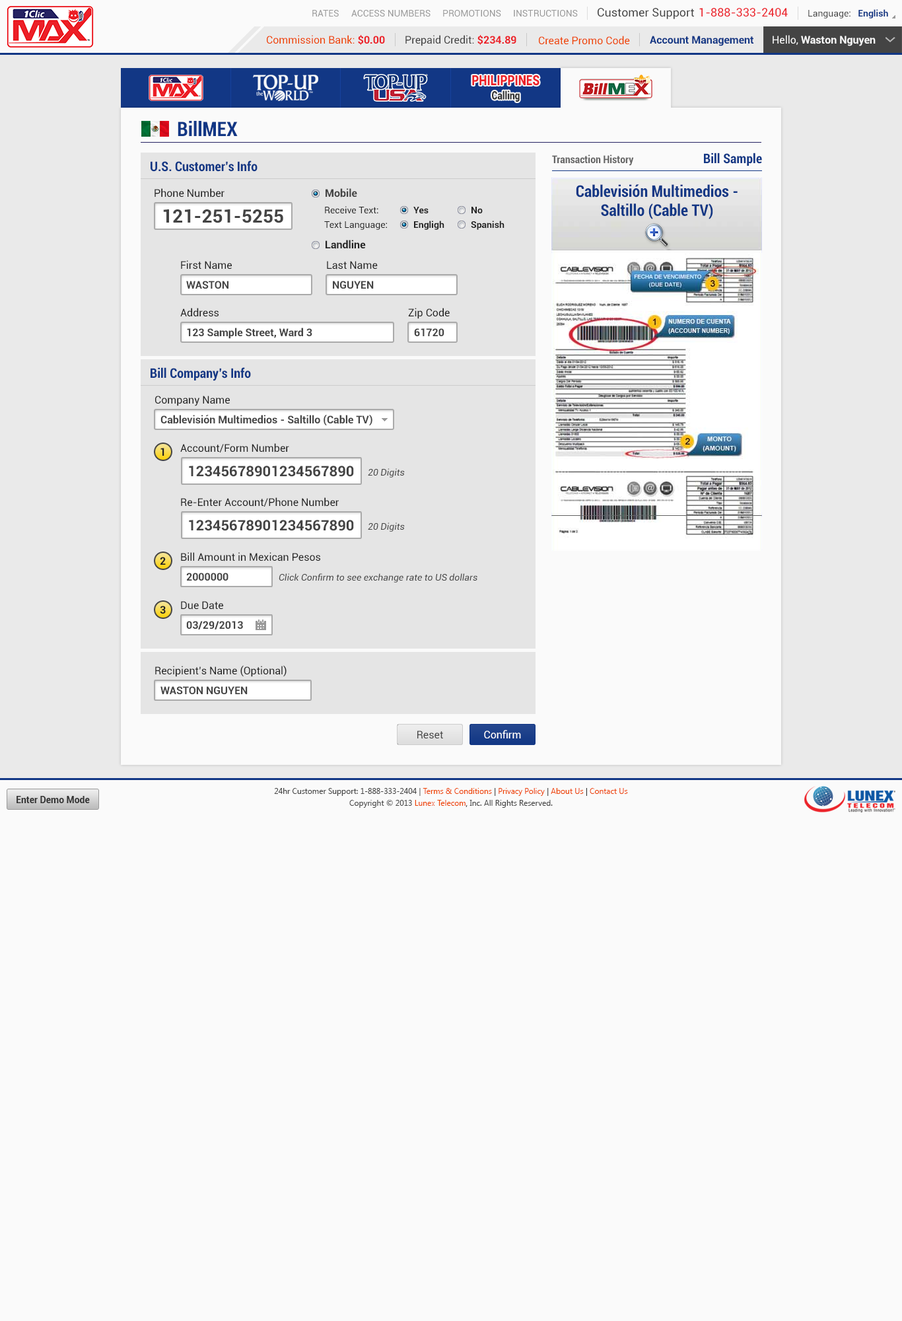
<style>
.page{position:relative;width:902px;height:1321px;background:#fafafa}
.page>*{position:absolute;margin:0}
.t1{font:9.2px "Roboto-Regular";color:#999999}
.t2{font:11.6px "Roboto-Regular";color:#444444}
.t3{font:11.6px "Roboto-Regular";color:#ec2029}
.t4{font:9.2px "Roboto-Regular";color:#444444}
.t5{font:9.2px "Roboto-Bold";color:#123785}
.t6{font:10.6px "Roboto-Regular";color:#ee4400}
.t7{font:10.6px "Roboto-Bold";color:#ec2028}
.t8{font:10.6px "Roboto-Regular";color:#444444}
.t9{font:10.6px "Roboto-Bold";color:#123785}
.t10{font:10.6px "Roboto-Bold";color:#fafafa}
.t11{font:10.6px "Roboto-Regular";color:#fafafa}
.t12{font:14.1px "Roboto-Black";color:#ec2028;scale:0.81 1}
.t13{font:11.3px "Roboto-Black";color:#333333;scale:0.81 1}
.t14{font:19.8px "Roboto-BoldCondensed";color:#123785}
.t15{font:13.2px "Roboto-BoldCondensed";color:#123785}
.t16{font:10.6px "Roboto-BoldCondensed";color:#666666}
.t17{font:15.9px "Roboto-BoldCondensed";color:#123785}
.t18{font:10.6px "Roboto-Regular";color:#222222}
.t19{font:10.6px "Roboto-Bold";color:#444444}
.t20{font:18.5px "Roboto-Bold";color:#444444}
.t21{font:9.2px "Roboto-Regular";color:#222222}
.t22{font:9.2px "Roboto-Bold";color:#222222}
.t23{font:10.6px "Roboto-Bold";color:#222222}
.t24{font:14.5px "Roboto-Bold";color:#444444}
.t25{font:9.2px "Roboto-Italic";color:#444444}
.t26{font:10.6px "Roboto-Regular";color:#ffffff}
.t27{font:9.2px "Roboto-Bold";color:#333333}
.t28{font:7.9px/11.9px "SegoeUI";color:#444444}
.t29{font:7.9px/11.9px "SegoeUI";color:#ee4400}
.t30{font:7.9px/11.9px "SegoeUI";color:#333333}
</style>
<div class="page">
<p class="t1" style="left:312px;top:10px;width:27px;height:7px">RATES</p>
<p class="t1" style="left:351px;top:10px;width:80px;height:7px">ACCESS NUMBERS</p>
<p class="t1" style="left:443px;top:10px;width:58px;height:7px">PROMOTIONS</p>
<p class="t1" style="left:514px;top:10px;width:64px;height:7px">INSTRUCTIONS</p>
<p class="t2" style="left:598px;top:8px;width:96px;height:11px">Customer Support</p>
<p class="t3" style="left:700px;top:8px;width:88px;height:9px">1-888-333-2404</p>
<p class="t4" style="left:809px;top:9px;width:80px;height:9px">Language:   <span class="t5">English</span></p>
<p class="t6" style="left:267px;top:35px;width:118px;height:10px">Commission Bank: <span class="t7">$0.00</span></p>
<p class="t8" style="left:406px;top:35px;width:111px;height:11px">Prepaid Credit: <span class="t7">$234.89</span></p>
<p class="t6" style="left:539px;top:36px;width:91px;height:9px">Create Promo Code</p>
<p class="t9" style="left:650px;top:36px;width:104px;height:10px">Account Management</p>
<p class="t10" style="left:773px;top:35px;width:103px;height:11px"><span class="t11">Hello, </span>Waston Nguyen</p>
<p class="t12" style="left:472px;top:75px;width:68px;height:11px">PHILIPPINES</p>
<p class="t13" style="left:492px;top:91px;width:28px;height:11px">Calling</p>
<p class="t14" style="left:178px;top:121px;width:60px;height:15px">BillMEX</p>
<p class="t15" style="left:151px;top:161px;width:107px;height:11px">U.S. Customer’s Info</p>
<p class="t16" style="left:552px;top:155px;width:82px;height:11px">Transaction History</p>
<p class="t15" style="left:704px;top:153px;width:58px;height:13px">Bill Sample</p>
<p class="t17" style="left:576px;top:184px;width:162px;height:35px;text-align:center">Cablevisión Multimedios -<br>Saltillo (Cable TV)</p>
<p class="t18" style="left:155px;top:188px;width:70px;height:10px">Phone Number</p>
<p class="t19" style="left:326px;top:188px;width:31px;height:10px">Mobile</p>
<p class="t20" style="left:163px;top:209px;width:120px;height:14px">121-251-5255</p>
<p class="t21" style="left:325px;top:206px;width:54px;height:7px">Receive Text:</p>
<p class="t22" style="left:414px;top:207px;width:15px;height:6px">Yes</p>
<p class="t22" style="left:472px;top:207px;width:11px;height:6px">No</p>
<p class="t21" style="left:324px;top:221px;width:63px;height:9px">Text Language:</p>
<p class="t22" style="left:414px;top:221px;width:31px;height:9px">Engligh</p>
<p class="t22" style="left:471px;top:221px;width:34px;height:9px">Spanish</p>
<p class="t23" style="left:326px;top:240px;width:40px;height:9px">Landline</p>
<p class="t18" style="left:181px;top:260px;width:51px;height:10px">First Name</p>
<p class="t18" style="left:327px;top:261px;width:51px;height:9px">Last Name</p>
<p class="t19" style="left:186px;top:281px;width:43px;height:8px">WASTON</p>
<p class="t19" style="left:333px;top:281px;width:41px;height:8px">NGUYEN</p>
<p class="t18" style="left:180px;top:308px;width:39px;height:8px">Address</p>
<p class="t18" style="left:408px;top:308px;width:42px;height:11px">Zip Code</p>
<p class="t19" style="left:187px;top:328px;width:125px;height:11px">123 Sample Street, Ward 3</p>
<p class="t19" style="left:414px;top:328px;width:31px;height:8px">61720</p>
<p class="t15" style="left:151px;top:367px;width:100px;height:14px">Bill Company’s Info</p>
<p class="t18" style="left:155px;top:396px;width:75px;height:10px">Company Name</p>
<p class="t19" style="left:161px;top:414px;width:212px;height:12px">Cablevisión Multimedios - Saltillo (Cable TV)</p>
<p class="t23" style="left:161px;top:448px;width:4px;height:8px">1</p>
<p class="t18" style="left:180px;top:443px;width:109px;height:10px">Account/Form Number</p>
<p class="t24" style="left:189px;top:466px;width:165px;height:11px">12345678901234567890</p>
<p class="t25" style="left:368px;top:468px;width:37px;height:10px">20 Digits</p>
<p class="t18" style="left:181px;top:497px;width:158px;height:10px">Re-Enter Account/Phone Number</p>
<p class="t24" style="left:189px;top:520px;width:165px;height:11px">12345678901234567890</p>
<p class="t25" style="left:368px;top:523px;width:37px;height:9px">20 Digits</p>
<p class="t23" style="left:160px;top:557px;width:6px;height:8px">2</p>
<p class="t18" style="left:181px;top:552px;width:139px;height:10px">Bill Amount in Mexican Pesos</p>
<p class="t19" style="left:186px;top:573px;width:43px;height:8px">2000000</p>
<p class="t25" style="left:279px;top:573px;width:199px;height:10px">Click Confirm to see exchange rate to US dollars</p>
<p class="t23" style="left:160px;top:606px;width:6px;height:8px">3</p>
<p class="t18" style="left:181px;top:601px;width:42px;height:9px">Due Date</p>
<p class="t19" style="left:186px;top:621px;width:57px;height:9px">03/29/2013</p>
<p class="t18" style="left:155px;top:665px;width:132px;height:12px">Recipient’s Name (Optional)</p>
<p class="t19" style="left:161px;top:686px;width:87px;height:8px">WASTON NGUYEN</p>
<p class="t8" style="left:418px;top:731px;width:25px;height:8px">Reset</p>
<p class="t26" style="left:484px;top:730px;width:37px;height:9px">Confirm</p>
<p class="t27" style="left:17px;top:796px;width:73px;height:7px">Enter Demo Mode</p>
<p class="t28" style="left:274px;top:788px;width:354px;height:20px;text-align:center">24hr Customer Support: 1-888-333-2404 | <span class="t29">Terms &amp; Conditions</span><span class="t30"> | </span><span class="t29">Privacy Policy</span><span class="t30"> | </span><span class="t29">About Us</span><span class="t30"> | </span><span class="t29">Contact Us<br></span>Copyright © 2013 <span class="t29">Lunex Telecom</span><span class="t30">,</span> Inc. All Rights Reserved.</p>
</div>
